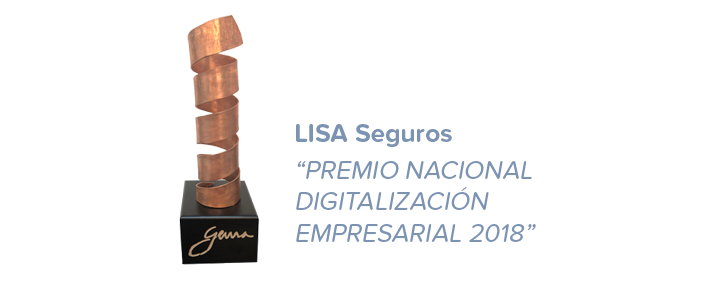
<style>
.page{position:relative;width:704px;height:294px;background:#ffffff}
.page>*{position:absolute;margin:0}
.t1{font:26.2px "ProximaNovaSoft-Regular";color:#7d93b2;font-style:italic}
.t2{font:26.2px "ProximaNovaSoft-Bold";color:#7d93b2}
</style>
<div class="page">
<p class="t1" style="left:296px;top:124px;width:240px;height:118px"><span class="t2">LISA Seguros<br></span>“PREMIO NACIONAL DIGITALIZACIÓN EMPRESARIAL 2018”</p>
</div>
